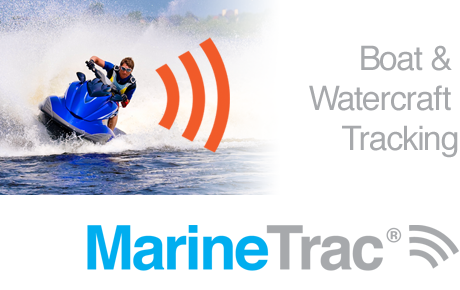
<style>
.page{position:relative;width:460px;height:290px;background:#ffffff}
.page>*{position:absolute;margin:0}
.t1{font:33.6px/40px "Helvetica";letter-spacing:-0.04em;color:#a7a9ac}
</style>
<div class="page">
<p class="t1" style="left:309px;top:45px;width:149px;height:113px;text-align:right">Boat &amp; <br>Watercraft <br>Tracking</p>
</div>
